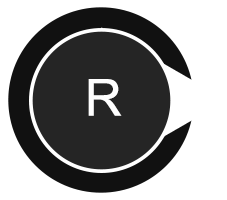
<style>
.page{position:relative;width:227px;height:200px;background:#ffffff}
.page>*{position:absolute;margin:0}
.t1{font:51.1px "ArialMT";color:#ffffff}
</style>
<div class="page">
<p class="t1" style="left:88px;top:79px;width:34px;height:37px">R</p>
</div>
